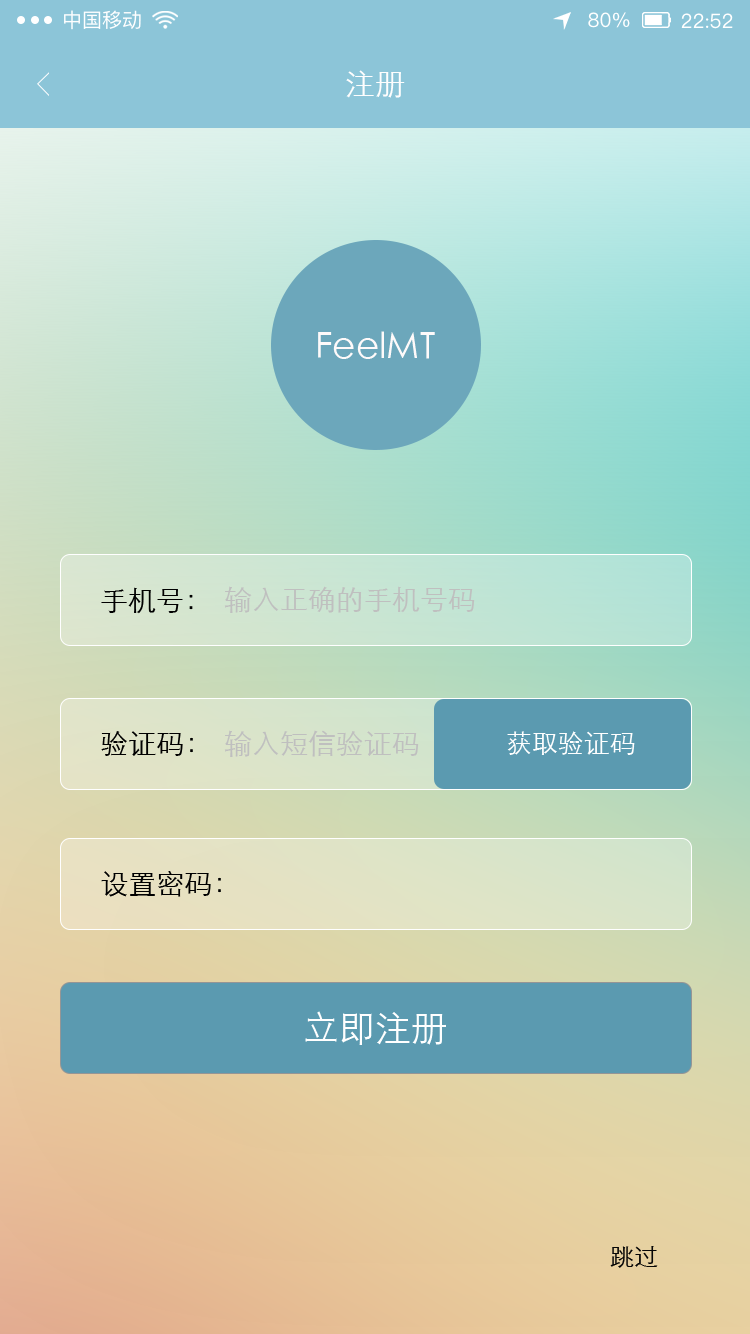
<style>
.page{position:relative;width:750px;height:1334px}
.page>*{position:absolute;margin:0}
.t1{font:20px "PingFangSC-Regular";color:#ffffff}
.t2{font:30px "STXihei";color:#fefefe}
.t3{font:36px "STXihei";color:#fefafa}
.t4{font:28px "STXihei";color:#000000}
.t5{font:28px "STXihei";color:#bfbfbf}
.t6{font:26px "STXihei";color:#ffffff}
.t7{font:36px "STXihei";color:#ffffff}
.t8{font:24px "STXihei";color:#060606}
</style>
<div class="page">
<p class="t1" style="left:64px;top:10px;width:77px;height:20px">中国移动</p>
<p class="t1" style="left:588px;top:12px;width:42px;height:16px">80%</p>
<p class="t1" style="left:681px;top:13px;width:52px;height:16px">22:52</p>
<p class="t2" style="left:346px;top:70px;width:59px;height:28px">注册</p>
<p class="t3" style="left:318px;top:331px;width:117px;height:28px">FeelMT</p>
<p class="t4" style="left:101px;top:587px;width:92px;height:27px">手机号：</p>
<p class="t5" style="left:224px;top:586px;width:251px;height:27px">输入正确的手机号码</p>
<p class="t4" style="left:101px;top:731px;width:92px;height:25px">验证码：</p>
<p class="t5" style="left:224px;top:730px;width:195px;height:27px">输入短信验证码</p>
<p class="t6" style="left:507px;top:731px;width:128px;height:24px">获取验证码</p>
<p class="t4" style="left:101px;top:871px;width:120px;height:26px">设置密码：</p>
<p class="t7" style="left:305px;top:1011px;width:141px;height:34px">立即注册</p>
<p class="t8" style="left:610px;top:1246px;width:48px;height:22px">跳过</p>
</div>
